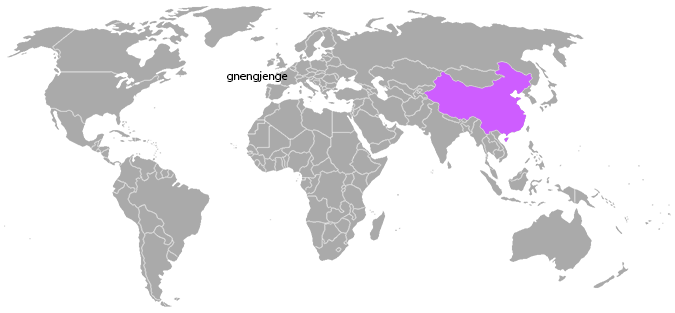
<style>
.page{position:relative;width:675px;height:313px;background:#ffffff}
.page>*{position:absolute;margin:0}
.t1{font:12px "MyriadPro-Regular";color:#000000}
</style>
<div class="page">
<p class="t1" style="left:227px;top:71px;width:61px;height:11px">gnengjenge</p>
</div>
